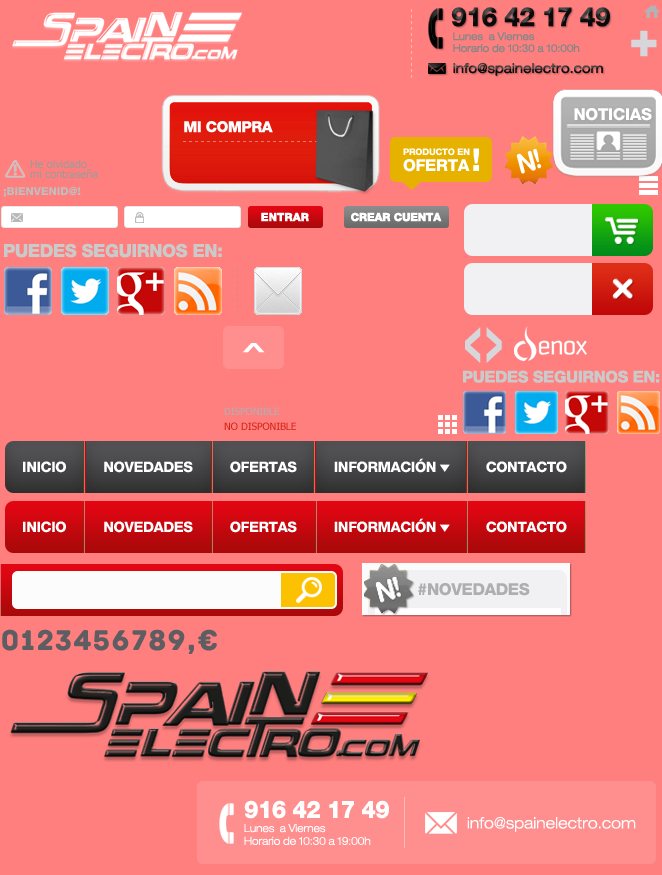
<style>
.page{position:relative;width:662px;height:875px;background:#ff7e7e}
.page>*{position:absolute;margin:0}
.t1{font:26.5px "Helvetica85-Heavy";letter-spacing:-0.025em;text-transform:uppercase;scale:0.95 1}
.t2{font:49.5px "Helvetica85-Heavy";letter-spacing:-0.025em;color:#d6d6db;text-transform:uppercase}
.t3{font:10.5px/7px "Helvetica43-ExtendedLight";letter-spacing:-0.005em;color:#868686;font-weight:bold;scale:0.91 1}
.t4{font:13.1px "Helvetica43-ExtendedLight";letter-spacing:0.01em;font-weight:bold;scale:0.95 1}
.t5{font:16.5px "Helvetica85-Heavy";letter-spacing:-0.025em;color:#ffffff;text-transform:uppercase}
.t6{font:15px "Helvetica85-Heavy";letter-spacing:-0.025em;color:#ffffff;text-transform:uppercase}
.t7{font:9.1px/11px "Helvetica85-Heavy";letter-spacing:-0.025em;color:#ffffff;text-transform:uppercase}
.t8{font:16.5px/11px "Helvetica85-Heavy";letter-spacing:-0.025em;color:#ffffff;text-transform:uppercase}
.t9{font:31.6px "Helvetica85-Heavy";letter-spacing:-0.025em;color:#ffffff;text-transform:uppercase}
.t10{font:11px/10px "Tahoma";color:#9b9b9b}
.t11{font:11px "Helvetica85-Heavy";letter-spacing:0.005em;color:#bebebe;text-transform:uppercase}
.t12{font:11px "Helvetica85-Heavy";color:#ffffff;text-transform:uppercase;font-weight:bold}
.t13{font:11px "Helvetica85-Heavy";letter-spacing:-0.025em;color:#ffffff;text-transform:uppercase;font-weight:bold}
.t14{font:18px "Helvetica85-Heavy";letter-spacing:-0.025em;color:#cacaca;text-transform:uppercase}
.t15{font:66.9px "Helvetica83-ExtendedHeavy";letter-spacing:-0.1em;color:#d6d6db;text-transform:uppercase;scale:0.45 1}
.t16{font:40px "Helvetica83-ExtendedHeavy";letter-spacing:-0.1em;color:#ffffff;text-transform:uppercase;scale:0.45 1}
.t17{font:16.2px "Helvetica85-Heavy";letter-spacing:-0.025em;color:#cacaca;text-transform:uppercase}
.t18{font:10px "Tahoma";color:#b0b0b4;text-transform:uppercase}
.t19{font:10px "Tahoma";color:#d52112;text-transform:uppercase}
.t20{font:14.5px "Helvetica85-Heavy";letter-spacing:-0.03em;color:#ffffff;text-transform:uppercase}
.t21{font:30px "Archive";letter-spacing:0.05em;color:#5e5e62;text-transform:uppercase}
.t22{font:24.1px "Helvetica85-Heavy";letter-spacing:-0.025em;color:#ffffff;text-transform:uppercase;scale:0.95 1}
.t23{font:15.6px "Helvetica43-ExtendedLight";letter-spacing:0.005em;color:#ffffff;scale:0.95 1}
.t24{font:11px/8px "Helvetica43-ExtendedLight";letter-spacing:-0.005em;color:#ffffff;scale:0.91 1}
</style>
<div class="page">
<p class="t1" style="left:451px;top:7px;width:159px;height:20px">916 42 17 49</p>
<p class="t2" style="left:631px;top:30px;width:26px;height:27px">+</p>
<p class="t3" style="left:453px;top:32px;width:127px;height:21px">Lunes  a Viernes<br>Horario de 10:30 a 10:00h</p>
<p class="t4" style="left:453px;top:62px;width:150px;height:14px">info@spainelectro.com</p>
<p class="t5" style="left:574px;top:108px;width:78px;height:13px">noticias</p>
<p class="t6" style="left:184px;top:121px;width:89px;height:12px">mi compra</p>
<p class="t7" style="left:403px;top:148px;width:67px;height:24px">producto en<br><span class="t8">oferta</span></p>
<p class="t9" style="left:473px;top:148px;width:6px;height:23px">!</p>
<p class="t10" style="left:30px;top:159px;width:68px;height:20px">He olvidado <br>mi contraseña</p>
<p class="t11" style="left:3px;top:187px;width:78px;height:10px">¡BIENVENID@!</p>
<p class="t12" style="left:261px;top:212px;width:48px;height:10px">entrar</p>
<p class="t13" style="left:351px;top:212px;width:91px;height:10px">crear cuenta</p>
<p class="t14" style="left:4px;top:243px;width:218px;height:15px">puedes seguirnos en:</p>
<p class="t15" style="left:465px;top:327px;width:16px;height:36px;rotate:-180deg">&gt;</p>
<p class="t15" style="left:486px;top:327px;width:16px;height:36px">&gt;</p>
<p class="t16" style="left:242px;top:343px;width:23px;height:10px;rotate:-90deg">&gt;</p>
<p class="t17" style="left:463px;top:370px;width:197px;height:13px">puedes seguirnos en:</p>
<p class="t18" style="left:224px;top:407px;width:56px;height:8px">Disponible</p>
<p class="t19" style="left:224px;top:422px;width:72px;height:8px">no Disponible</p>
<p class="t20" style="left:23px;top:458px;width:544px;height:15px">inicio         novedades         ofertas         información            contacto</p>
<p class="t20" style="left:23px;top:518px;width:544px;height:15px">inicio         novedades         ofertas         información            contacto</p>
<p class="t21" style="left:2px;top:629px;width:215px;height:25px">0123456789,€</p>
<p class="t22" style="left:244px;top:800px;width:145px;height:19px">916 42 17 49</p>
<p class="t23" style="left:467px;top:816px;width:169px;height:16px">info@spainelectro.com</p>
<p class="t24" style="left:244px;top:824px;width:127px;height:21px">Lunes  a Viernes<br>Horario de 10:30 a 19:00h</p>
</div>
